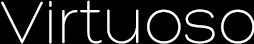
<style>
.page{position:relative;width:254px;height:44px;background:#000000}
.page>*{position:absolute;margin:0}
.t1{font:64.5px "Hero-Light";color:#ffffff}
</style>
<div class="page">
<p class="t1" style="left:1px;top:0px;width:254px;height:44px">Virtuoso</p>
</div>
